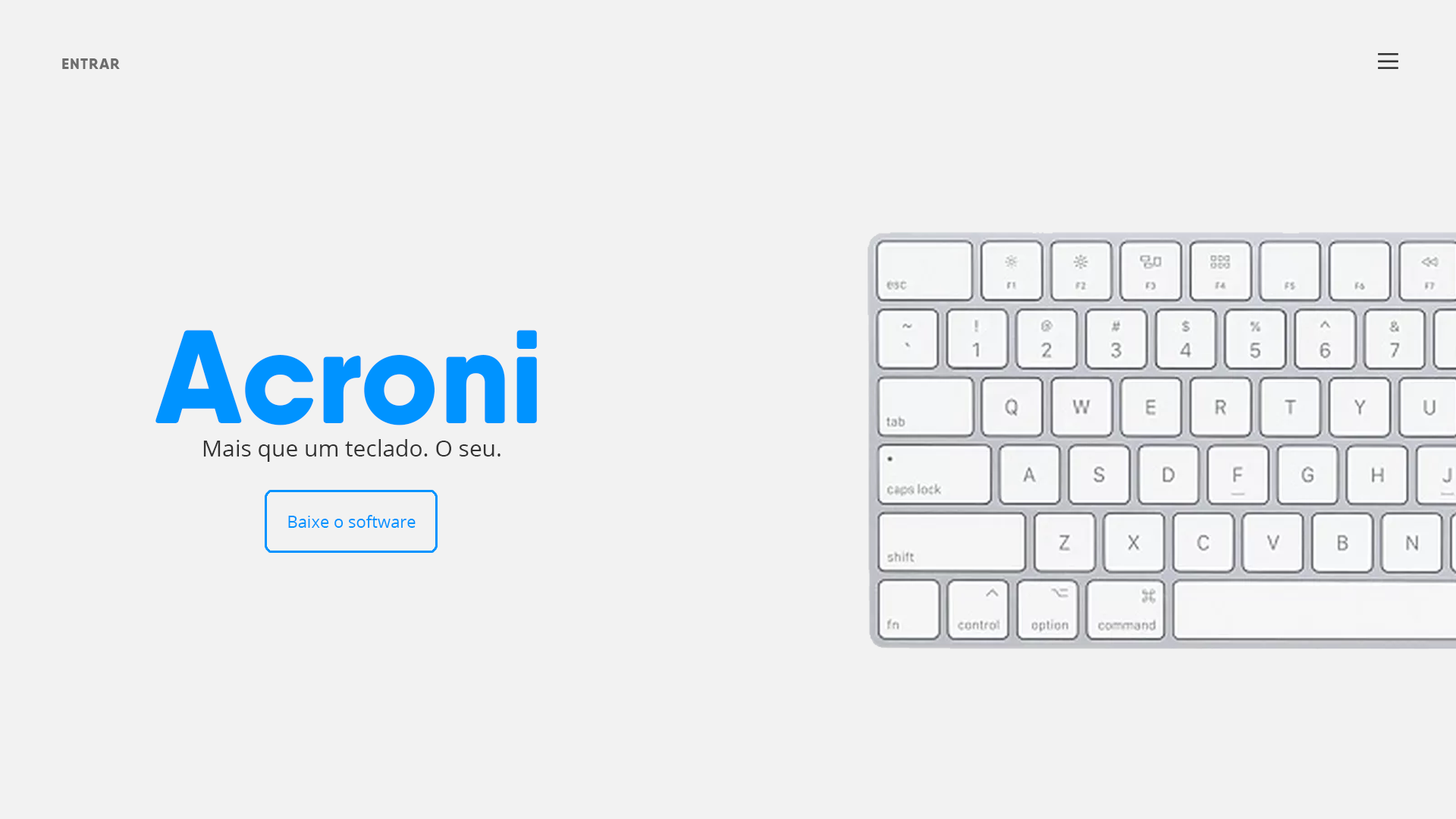
<style>
.page{position:relative;width:1456px;height:819px;background:#f2f2f2}
.page>*{position:absolute;margin:0}
.t1{font:15.2px "QanelasSoftDEMO-ExtraBold";letter-spacing:0.05em;color:#6d6d6d}
.t2{font:132.7px "QanelasSoftDEMO-ExtraBold";color:#0093ff}
.t3{font:22.7px "OpenSans-Regular";color:#333333}
.t4{font:16.7px "OpenSans-Regular";color:#0093ff}
</style>
<div class="page">
<p class="t1" style="left:62px;top:58px;width:58px;height:11px">ENTRAR</p>
<p class="t2" style="left:155px;top:330px;width:382px;height:95px">Acroni</p>
<p class="t3" style="left:203px;top:439px;width:297px;height:23px">Mais que um teclado. O seu.</p>
<p class="t4" style="left:288px;top:515px;width:128px;height:13px">Baixe o software</p>
</div>
